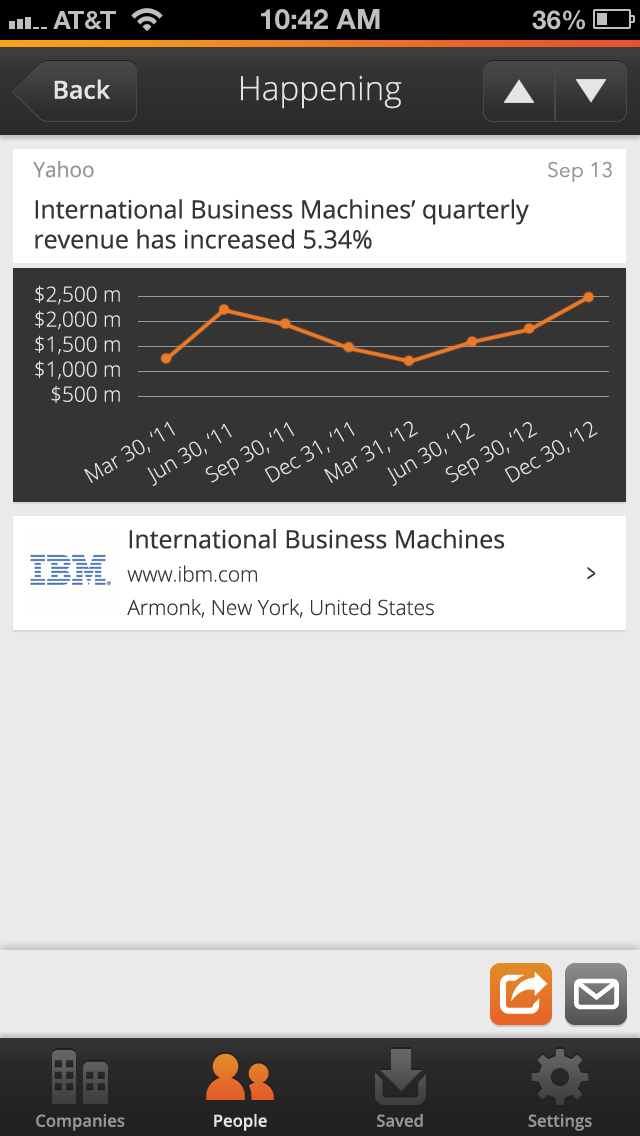
<style>
.page{position:relative;width:640px;height:1136px;background:#eaeaea}
.page>*{position:absolute;margin:0}
.t1{font:33.3px "OpenSans-Light";color:#e5e5e5}
.t2{font:25px "OpenSans-Semibold";color:#e5e5e5}
.t3{font:25px "OpenSans";color:#343434}
.t4{font:20.8px "OpenSans";color:#969696}
.t5{font:20.8px "AvenirNext-Regular";color:#969696}
.t6{font:20.8px "OpenSans-Light";color:#e5e5e5}
.t7{font:20.8px "OpenSans-Light";color:#343434}
.t8{font:25px "OpenSans";color:#343434;scale:0.64 1}
.t9{font:16.7px "OpenSans-Semibold";color:#969696}
.t10{font:16.7px "OpenSans-Semibold";color:#e5e5e5}
</style>
<div class="page">
<p class="t1" style="left:241px;top:75px;width:161px;height:34px">Happening</p>
<p class="t2" style="left:54px;top:79px;width:57px;height:20px">Back</p>
<p class="t3" style="left:33px;top:161px;width:496px;height:88px"><span class="t4">Yahoo<br></span>International Business Machines’ quarterly revenue has increased 5.34%</p>
<p class="t5" style="left:548px;top:161px;width:64px;height:21px">Sep 13</p>
<p class="t6" style="left:35px;top:285px;width:85px;height:118px;text-align:right">$2,500 m<br>$2,000 m<br>$1,500 m<br>$1,000 m<br>$500 m</p>
<p class="t6" style="left:84px;top:421px;width:91px;height:62px;rotate:-30deg">Mar 30, ‘11</p>
<p class="t6" style="left:147px;top:423px;width:85px;height:63px;rotate:-30deg">Jun 30, ‘11</p>
<p class="t6" style="left:205px;top:422px;width:90px;height:61px;rotate:-30deg">Sep 30, ‘11</p>
<p class="t6" style="left:264px;top:422px;width:91px;height:61px;rotate:-30deg">Dec 31, ‘11</p>
<p class="t6" style="left:324px;top:421px;width:94px;height:62px;rotate:-30deg">Mar 31, ‘12</p>
<p class="t6" style="left:387px;top:423px;width:88px;height:63px;rotate:-30deg">Jun 30, ‘12</p>
<p class="t6" style="left:445px;top:422px;width:93px;height:61px;rotate:-30deg">Sep 30, ‘12</p>
<p class="t6" style="left:504px;top:421px;width:94px;height:62px;rotate:-30deg">Dec 30, ‘12</p>
<p class="t7" style="left:127px;top:529px;width:378px;height:89px"><span class="t3">International Business Machines<br></span>www.ibm.com<br>Armonk, New York, United States</p>
<p class="t8" style="left:587px;top:567px;width:9px;height:13px">&gt;</p>
<p class="t9" style="left:36px;top:1114px;width:89px;height:17px">Companies</p>
<p class="t10" style="left:214px;top:1114px;width:53px;height:17px">People</p>
<p class="t9" style="left:377px;top:1114px;width:46px;height:13px">Saved</p>
<p class="t9" style="left:528px;top:1114px;width:64px;height:17px">Settings</p>
</div>
